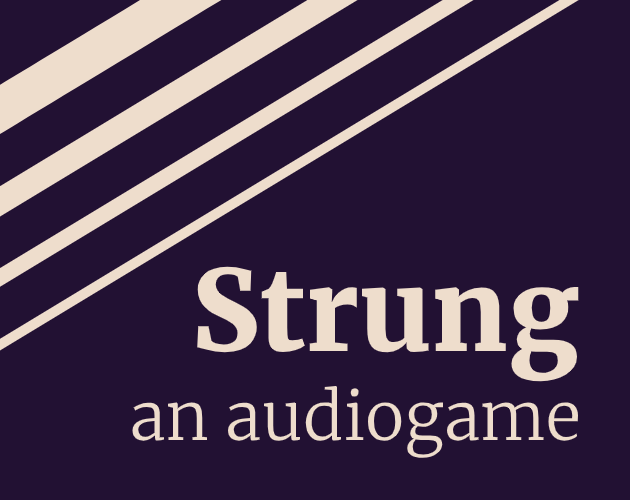
<style>
.page{position:relative;width:630px;height:500px;background:#221133}
.page>*{position:absolute;margin:0}
.t1{font:112px "Merriweather-Black";color:#eeddcc}
.t2{font:66px "Merriweather-Light";color:#eeddcc}
</style>
<div class="page">
<p class="t1" style="left:197px;top:266px;width:382px;height:116px">Strung</p>
<p class="t2" style="left:132px;top:385px;width:447px;height:73px">an audiogame</p>
</div>
